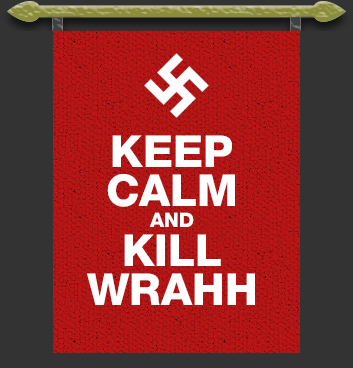
<style>
.page{position:relative;width:353px;height:368px;background:#333333}
.page>*{position:absolute;margin:0}
.t1{font:44px/39px "Helvetica85-Heavy";color:#ffffff}
.t2{font:20px/21px "Helvetica85-Heavy";color:#ffffff}
</style>
<div class="page">
<p class="t1" style="left:87px;top:135px;width:168px;height:170px;text-align:center">KEEP<br>CALM<br><span class="t2">AND<br></span>KILL<br>WRAHH</p>
</div>
